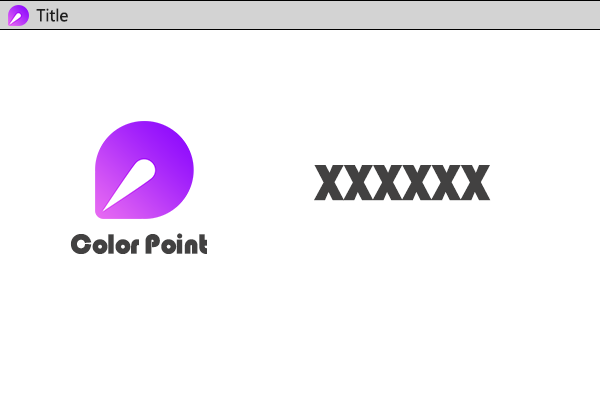
<style>
.page{position:relative;width:600px;height:400px;background:#ffffff}
.page>*{position:absolute;margin:0}
.t1{font:16px "MicrosoftYaHei";color:#1f1f1f}
.t2{font:52.6px "STHupo";letter-spacing:0.08em;color:#424141}
.t3{font:28.8px "STHupo";letter-spacing:-0.02em;color:#424141}
</style>
<div class="page">
<p class="t1" style="left:36px;top:8px;width:32px;height:14px">Title</p>
<p class="t2" style="left:314px;top:165px;width:177px;height:36px">XXXXXX</p>
<p class="t3" style="left:70px;top:233px;width:137px;height:21px">Color Point</p>
</div>
